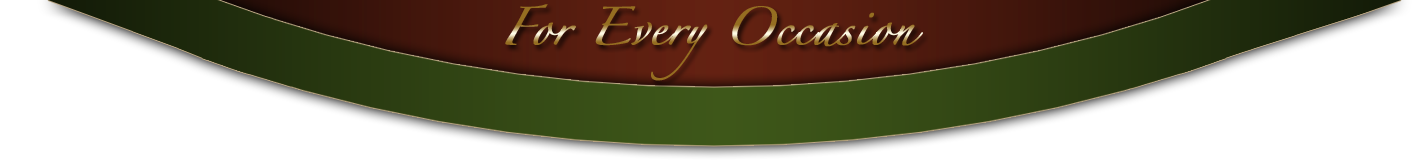
<style>
.page{position:relative;width:1428px;height:160px;background:#ffffff}
.page>*{position:absolute;margin:0}
.t1{font:34px "Zapfino";font-weight:bold}
</style>
<div class="page">
<p class="t1" style="left:505px;top:4px;width:418px;height:77px;text-align:center">For Every Occasion</p>
</div>
